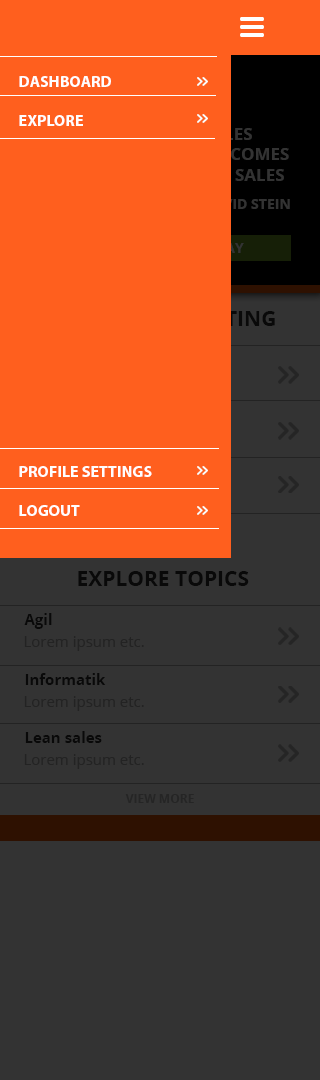
<style>
.page{position:relative;width:320px;height:1080px;background:#333333}
.page>*{position:absolute;margin:0}
.t1{font:16px/39px "MyriadPro-Bold";color:#fffefe;text-transform:uppercase}
.t2{font:17px "OpenSans-Bold";text-transform:uppercase}
.t3{font:14px "OpenSans-Bold";text-transform:uppercase}
.t4{font:14px "OpenSans-Bold";color:#ff5f1e;text-transform:uppercase}
.t5{font:21px "OpenSans-Bold";color:#ff5f1e;text-transform:uppercase}
.t6{font:21px "OpenSans-Bold";color:#090909;text-transform:uppercase}
.t7{font:15px "OpenSans-Bold";color:#090909}
.t8{font:15px "OpenSans";color:#232323}
.t9{font:12px "OpenSans-Bold";color:#252525;text-transform:uppercase}
</style>
<div class="page">
<p class="t1" style="left:19px;top:76px;width:133px;height:440px">Dashboard<br>Explore<br><br><br><br><br><br><br><br><br>Profile settings<br>logout</p>
<p class="t2" style="left:166px;top:128px;width:123px;height:53px">the sales letter comes last in sales</p>
<p class="t3" style="left:182px;top:199px;width:108px;height:10px">by David stein</p>
<p class="t4" style="left:209px;top:243px;width:35px;height:10px">Play</p>
<p class="t5" style="left:50px;top:311px;width:225px;height:15px">Most contributing</p>
<p class="t6" style="left:78px;top:571px;width:171px;height:15px">explore topics</p>
<p class="t7" style="left:24px;top:613px;width:28px;height:16px">Agil</p>
<p class="t8" style="left:24px;top:636px;width:120px;height:15px">Lorem ipsum etc.</p>
<p class="t7" style="left:25px;top:673px;width:81px;height:12px">Informatik</p>
<p class="t8" style="left:24px;top:696px;width:120px;height:15px">Lorem ipsum etc.</p>
<p class="t7" style="left:25px;top:731px;width:77px;height:12px">Lean sales</p>
<p class="t8" style="left:24px;top:754px;width:120px;height:15px">Lorem ipsum etc.</p>
<p class="t9" style="left:125px;top:794px;width:69px;height:9px">view more</p>
</div>
